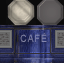
<style>
.page{position:relative;width:64px;height:63px}
.page>*{position:absolute;margin:0}
.t1{font:10px "ArialMT";letter-spacing:0.1em;color:#8385ac;text-transform:uppercase;scale:0.9 1}
</style>
<div class="page">
<p class="t1" style="left:20px;top:33px;width:27px;height:9px">CAFÉ</p>
</div>
